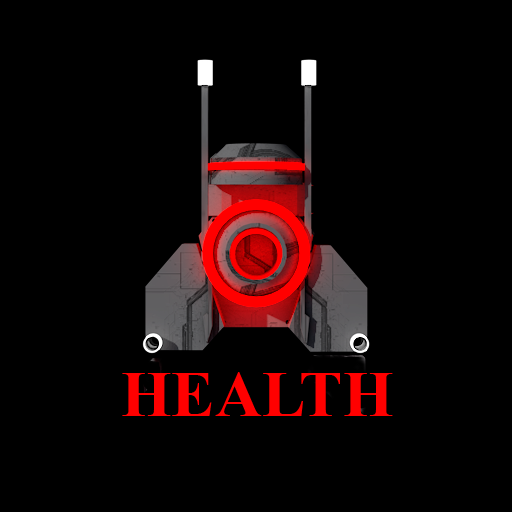
<style>
.page{position:relative;width:512px;height:512px;background:#000000}
.page>*{position:absolute;margin:0}
.t1{font:65px "TimesNewRomanPS-BoldMT";color:#ff0000}
</style>
<div class="page">
<p class="t1" style="left:122px;top:372px;width:271px;height:44px">HEALTH</p>
</div>
